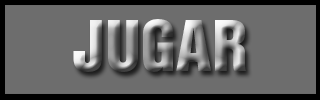
<style>
.page{position:relative;width:320px;height:100px;background:#6d6d6d}
.page>*{position:absolute;margin:0}
.t1{font:64.2px "HelveticaInseratLTStd-Roman"}
</style>
<div class="page">
<p class="t1" style="left:73px;top:19px;width:174px;height:53px">JUGAR</p>
</div>
